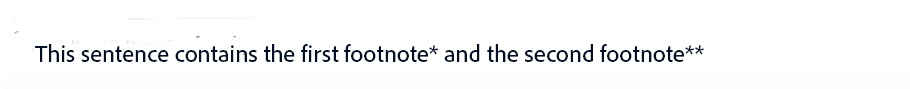
<style>
.page{position:relative;width:910px;height:89px;background:#ffffff}
.page>*{position:absolute;margin:0}
.t1{font:24px "AdobeClean-Medium";color:#041025}
</style>
<div class="page">
<p class="t1" style="left:34px;top:44px;width:670px;height:18px">This sentence contains the first footnote* and the second footnote**</p>
</div>
